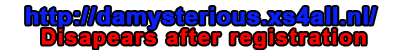
<style>
.page{position:relative;width:400px;height:50px;background:#ffffff}
.page>*{position:absolute;margin:0}
.t1{font:23px "Arial-BoldMT";color:#0920fb;font-weight:bold;scale:1.05 1}
.t2{font:19.8px "Arial-BoldMT";letter-spacing:0.075em;color:#ff0000;font-weight:bold;scale:1.05 1}
</style>
<div class="page">
<p class="t1" style="left:26px;top:7px;width:351px;height:23px">http://damysterious.xs4all.nl/</p>
<p class="t2" style="left:42px;top:29px;width:324px;height:20px">Disapears after registration</p>
</div>
